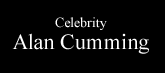
<style>
.page{position:relative;width:165px;height:73px;background:#000000}
.page>*{position:absolute;margin:0}
.t1{font:22px/22px "TimesNewRomanPSMT";color:#ffffff}
.t2{font:14px/18px "TimesNewRomanPSMT";color:#ffffff}
</style>
<div class="page">
<p class="t1" style="left:12px;top:17px;width:137px;height:37px;text-align:center"><span class="t2">Celebrity<br></span>Alan Cumming</p>
</div>
